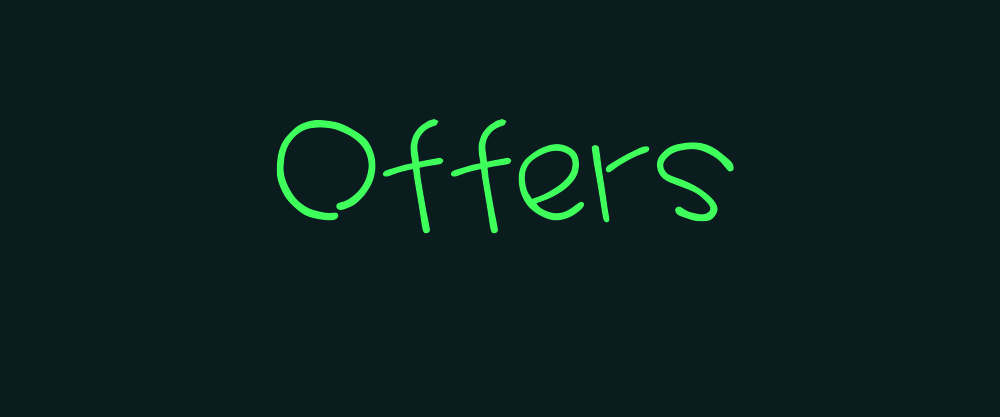
<style>
.page{position:relative;width:1000px;height:417px;background:#0a1c1d}
.page>*{position:absolute;margin:0}
.t1{font:150px "JYaYa";color:#3fff5b}
</style>
<div class="page">
<p class="t1" style="left:276px;top:118px;width:458px;height:116px">Offers</p>
</div>
